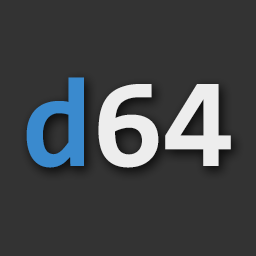
<style>
.page{position:relative;width:256px;height:256px;background:#333333}
.page>*{position:absolute;margin:0}
.t1{font:128px "Consolas-Bold";color:#ededed}
.t2{font:128px "Consolas-Bold";color:#3a8ace}
</style>
<div class="page">
<p class="t1" style="left:26px;top:77px;width:205px;height:91px"><span class="t2">d</span>64</p>
</div>
